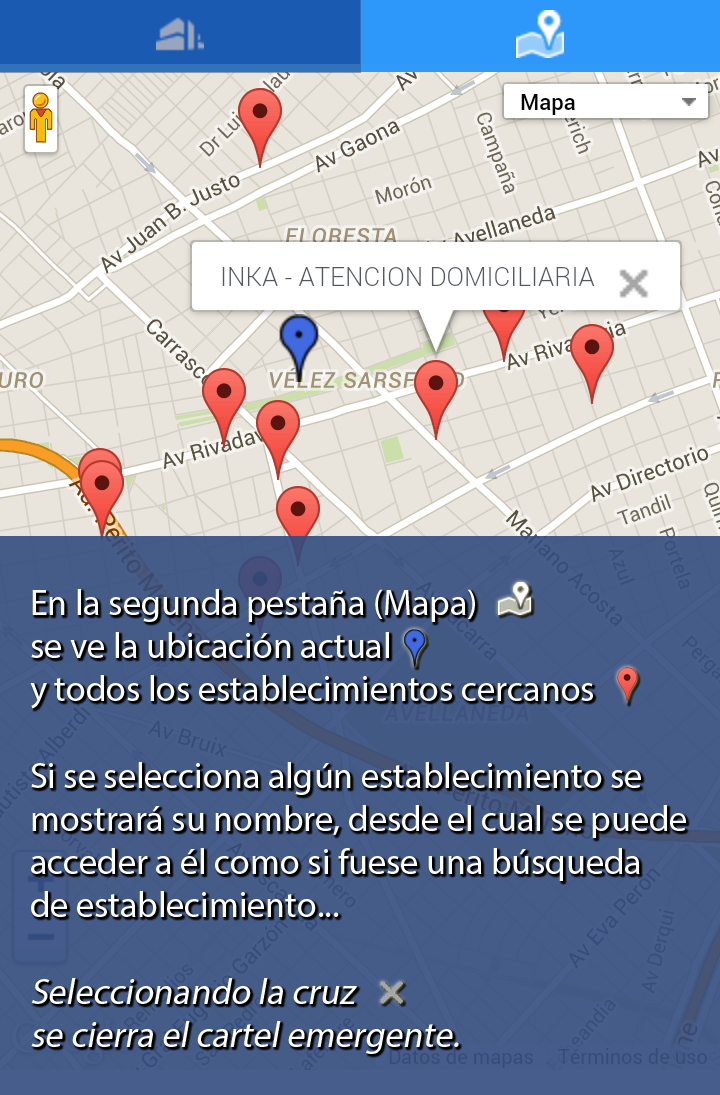
<style>
.page{position:relative;width:720px;height:1095px;background:#455b88}
.page>*{position:absolute;margin:0}
.t1{font:36px "MyriadPro-Regular";color:#ffffff}
.t2{font:36px "MyriadPro-Regular";color:#ffffff;font-style:italic}
</style>
<div class="page">
<p class="t1" style="left:30px;top:589px;width:656px;height:465px">En la segunda pestaña (Mapa)<br>se ve la ubicación actual<br>y todos los establecimientos cercanos<br><br>Si se selecciona algún establecimiento se  <br>mostrará su nombre, desde el cual se puede<br>acceder a él como si fuese una búsqueda<br>de establecimiento...<br><br><span class="t2">Seleccionando la cruz <br>se cierra el cartel emergente.</span></p>
</div>
